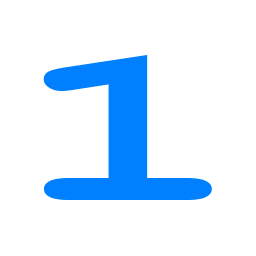
<style>
.page{position:relative;width:256px;height:256px;background:#ffffff}
.page>*{position:absolute;margin:0}
.t1{font:222.5px "CourierNewPS-BoldMT";color:#0080ff;scale:1.73 1}
</style>
<div class="page">
<p class="t1" style="left:43px;top:55px;width:169px;height:145px">1</p>
</div>
